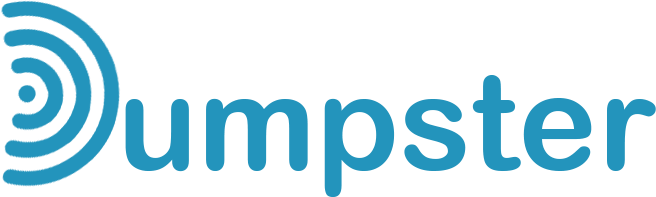
<style>
.page{position:relative;width:656px;height:197px;background:#ffffff}
.page>*{position:absolute;margin:0}
.t1{font:133.3px "ArialRoundedMTBold";color:#2394bc}
</style>
<div class="page">
<p class="t1" style="left:125px;top:75px;width:531px;height:122px">umpster</p>
</div>
